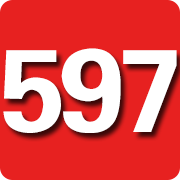
<style>
.page{position:relative;width:180px;height:180px;background:#e72120}
.page>*{position:absolute;margin:0}
.t1{font:118px "FZH4FW--GB1-0";letter-spacing:-0.05em;color:#ffffff}
</style>
<div class="page">
<p class="t1" style="left:3px;top:48px;width:174px;height:85px">597</p>
</div>
